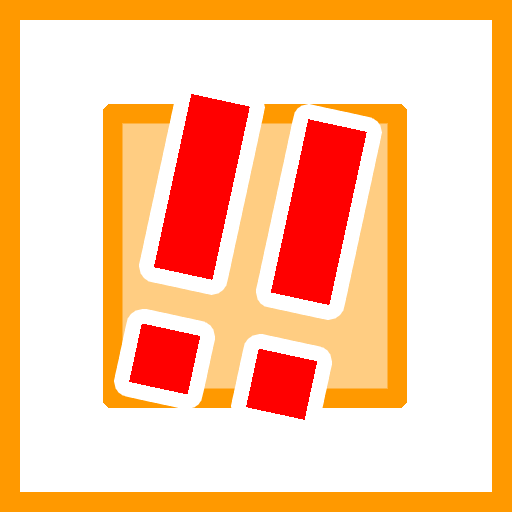
<style>
.page{position:relative;width:512px;height:512px;background:#ffffff}
.page>*{position:absolute;margin:0}
.t1{font:469.4px "Kenney-Future-Square";color:#ff0000}
</style>
<div class="page">
<p class="t1" style="left:129px;top:94px;width:238px;height:326px;rotate:12deg">!!</p>
</div>
